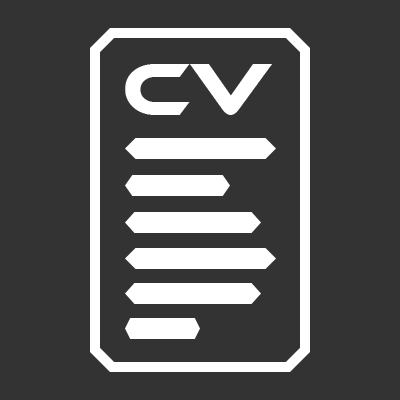
<style>
.page{position:relative;width:400px;height:400px;background:#333333}
.page>*{position:absolute;margin:0}
.t1{font:70px "Ethnocentric";color:#ffffff}
</style>
<div class="page">
<p class="t1" style="left:125px;top:64px;width:147px;height:51px">CV</p>
</div>
